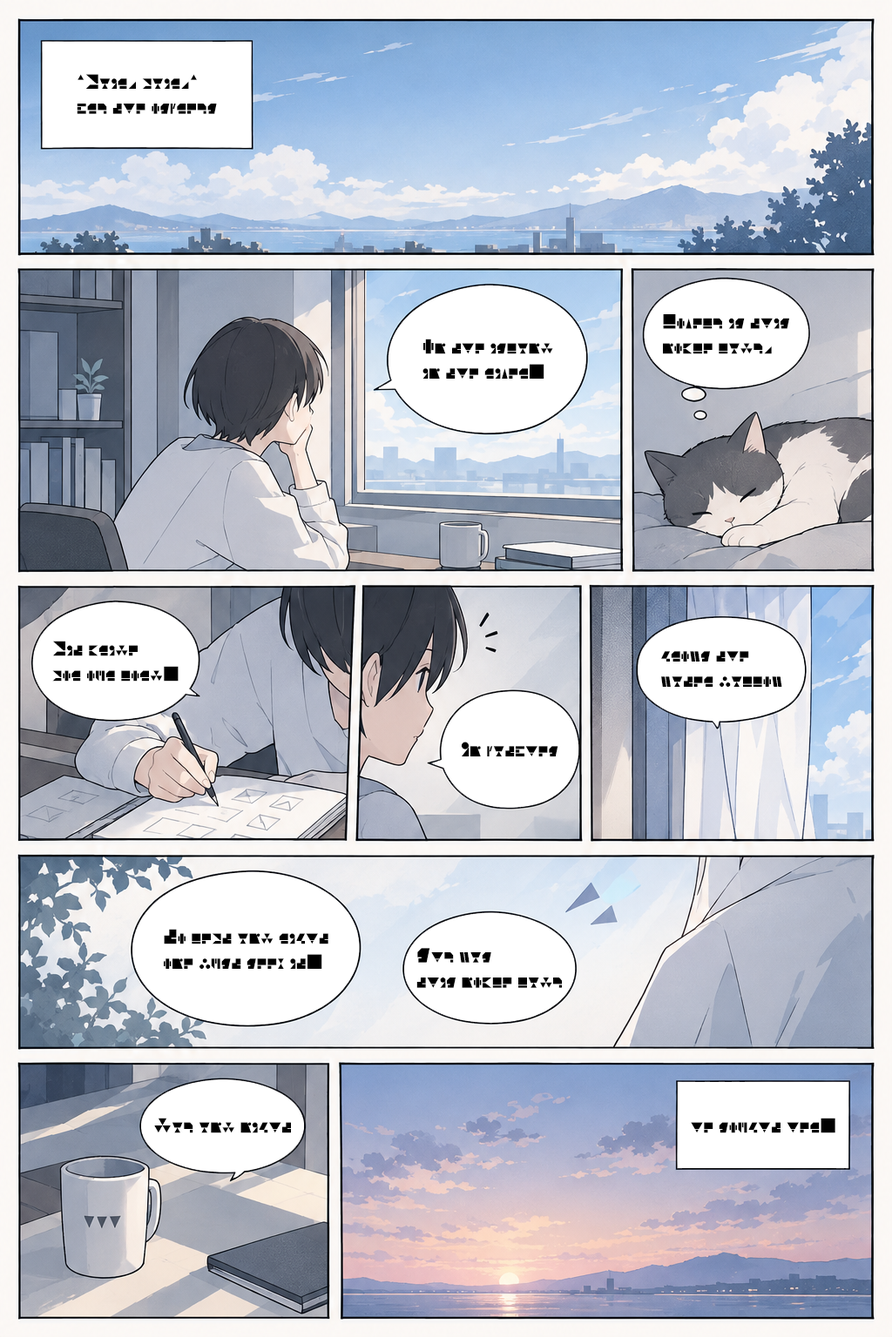
<style>
.page{position:relative;width:892px;height:1337px}
.page>*{position:absolute;margin:0}
.t1{font:20.9px "EndfieldByButan";color:#000000}
</style>
<div class="page">
<p class="t1" style="left:77px;top:74px;width:140px;height:40px">“Fair, fair,” <br>cry the ospreys</p>
<p class="t1" style="left:663px;top:314px;width:126px;height:40px">Lovely is this <br>noble lady,</p>
<p class="t1" style="left:422px;top:339px;width:131px;height:40px">On the island <br>in the river.</p>
<p class="t1" style="left:52px;top:641px;width:126px;height:41px">Fit bride <br>for our lord.</p>
<p class="t1" style="left:661px;top:651px;width:121px;height:36px">grows the <br>water mallow;</p>
<p class="t1" style="left:461px;top:742px;width:97px;height:15px">In patches</p>
<p class="t1" style="left:164px;top:929px;width:164px;height:40px">To left and right <br>one must seek it.</p>
<p class="t1" style="left:416px;top:948px;width:146px;height:40px">Shy was <br>this noble lady;</p>
<p class="t1" style="left:154px;top:1118px;width:137px;height:16px">Day and night</p>
<p class="t1" style="left:690px;top:1118px;width:145px;height:16px">he sought her.</p>
</div>
